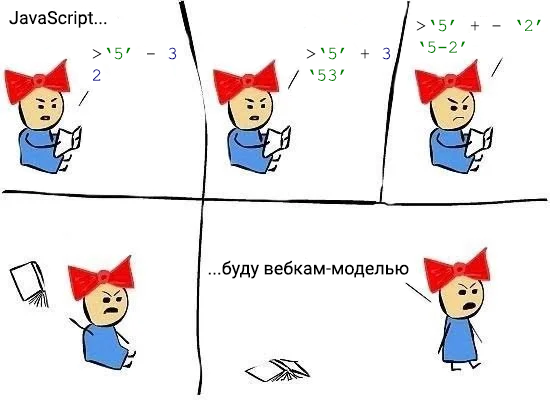
<style>
.page{position:relative;width:550px;height:400px;background:#ffffff}
.page>*{position:absolute;margin:0}
.t1{font:18px "Roboto-Regular";color:#000000}
.t2{font:18px "CourierNewPSMT";color:#008000}
.t3{font:18px "CourierNewPSMT";color:#000000}
.t4{font:18px "CourierNewPSMT";color:#000080}
</style>
<div class="page">
<p class="t1" style="left:9px;top:11px;width:98px;height:17px">JavaScript...</p>
<p class="t2" style="left:416px;top:19px;width:125px;height:34px;text-align:right"><span class="t3">&gt;</span>‘5’<span class="t3"> + - </span>‘2’<br>‘5-2’</p>
<p class="t2" style="left:92px;top:47px;width:85px;height:34px;text-align:right">&gt;‘5’ - 3<br>2</p>
<p class="t2" style="left:306px;top:47px;width:85px;height:34px;text-align:right"><span class="t3">&gt;</span>‘5’<span class="t3"> + </span><span class="t4">3<br></span>‘53’</p>
<p class="t1" style="left:208px;top:260px;width:201px;height:19px">...буду вебкам-моделью</p>
</div>
